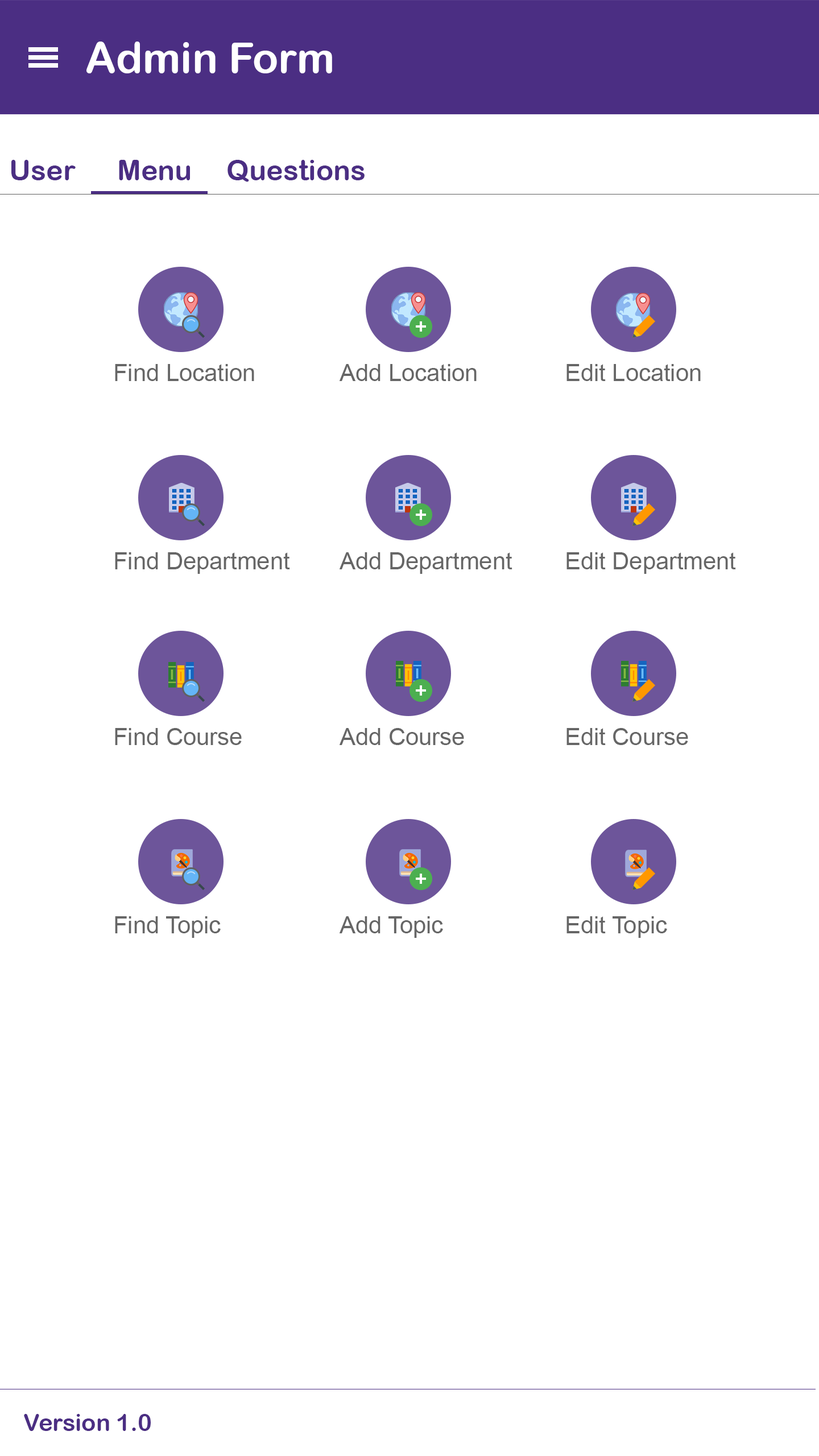
<style>
.page{position:relative;width:819px;height:1456px;background:#ffffff}
.page>*{position:absolute;margin:0}
.t1{font:42.7px "ArialRoundedMTBold";color:#ffffff}
.t2{font:28.4px "ArialRoundedMTBold";color:#4b2e83}
.t3{font:23.7px "ArialMT";color:#666666}
.t4{font:23.7px "ArialRoundedMTBold";color:#4b2e83}
</style>
<div class="page">
<p class="t1" style="left:86px;top:42px;width:246px;height:31px">Admin Form</p>
<p class="t2" style="left:11px;top:160px;width:65px;height:20px">User</p>
<p class="t2" style="left:119px;top:160px;width:71px;height:20px">Menu</p>
<p class="t2" style="left:227px;top:160px;width:138px;height:22px">Questions</p>
<p class="t3" style="left:115px;top:364px;width:139px;height:17px">Find Location</p>
<p class="t3" style="left:339px;top:364px;width:138px;height:17px">Add Location</p>
<p class="t3" style="left:566px;top:364px;width:135px;height:17px">Edit Location</p>
<p class="t3" style="left:115px;top:552px;width:175px;height:22px">Find Department</p>
<p class="t3" style="left:339px;top:552px;width:173px;height:22px">Add Department</p>
<p class="t3" style="left:566px;top:552px;width:170px;height:22px">Edit Department</p>
<p class="t3" style="left:115px;top:728px;width:127px;height:17px">Find Course</p>
<p class="t3" style="left:339px;top:728px;width:125px;height:17px">Add Course</p>
<p class="t3" style="left:566px;top:728px;width:122px;height:17px">Edit Course</p>
<p class="t3" style="left:115px;top:916px;width:106px;height:22px">Find Topic</p>
<p class="t3" style="left:339px;top:916px;width:104px;height:22px">Add Topic</p>
<p class="t3" style="left:566px;top:916px;width:101px;height:22px">Edit Topic</p>
<p class="t4" style="left:24px;top:1414px;width:127px;height:17px">Version 1.0</p>
</div>
